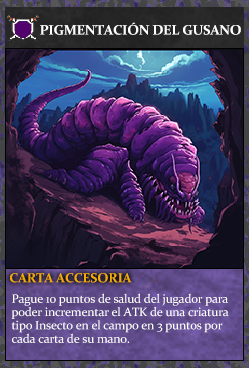
<style>
.page{position:relative;width:249px;height:368px}
.page>*{position:absolute;margin:0}
.t1{font:13.9px "Constantia-Bold";letter-spacing:-0.02em;color:#ffffff}
.t2{font:13.3px "Constantia-Bold";letter-spacing:-0.02em;color:#f2ac05}
.t3{font:12.3px/13.3px "Constantia";letter-spacing:-0.02em;color:#ffffff}
</style>
<div class="page">
<p class="t1" style="left:40px;top:22px;width:201px;height:13px">PIGMENTACIÓN DEL GUSANO</p>
<p class="t2" style="left:10px;top:273px;width:122px;height:10px">CARTA ACCESORIA</p>
<p class="t3" style="left:11px;top:293px;width:218px;height:50px">Pague 10 puntos de salud del jugador para<br>poder incrementar el ATK de una criatura<br>tipo Insecto en el campo en 3 puntos por<br>cada carta de su mano.</p>
</div>
